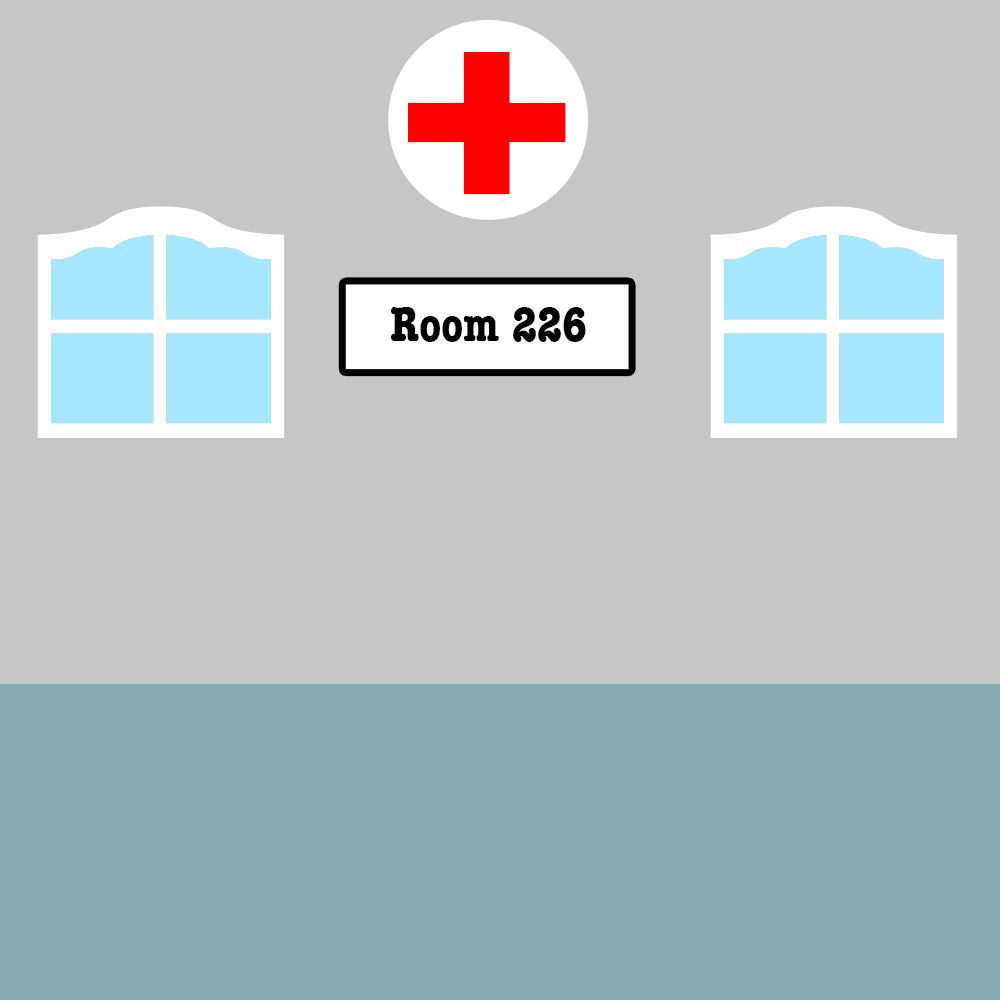
<style>
.page{position:relative;width:1000px;height:1000px;background:#c6c6c6}
.page>*{position:absolute;margin:0}
.t1{font:333.3px "AmericanTypewriter-CondensedBold";color:#ff0000;scale:1.09 1}
.t2{font:50px "AmericanTypewriter-CondensedBold";color:#000000}
</style>
<div class="page">
<p class="t1" style="left:408px;top:52px;width:158px;height:143px">+</p>
<p class="t2" style="left:391px;top:307px;width:195px;height:35px">Room 226</p>
</div>
